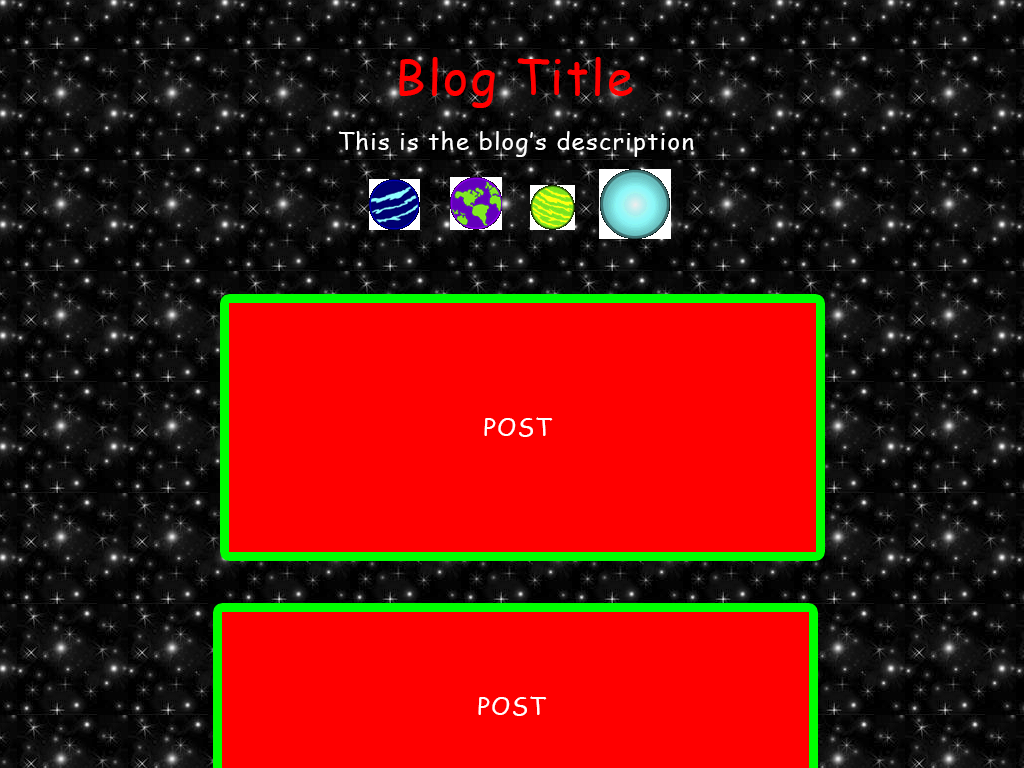
<style>
.page{position:relative;width:1024px;height:768px;background:#ff0000}
.page>*{position:absolute;margin:0}
.t1{font:48px "ComicSansMS";letter-spacing:0.05em;color:#ff0000}
.t2{font:24px "ComicSansMS";letter-spacing:0.05em;color:#ffffff}
</style>
<div class="page">
<p class="t1" style="left:399px;top:57px;width:234px;height:51px">Blog Title</p>
<p class="t2" style="left:338px;top:131px;width:356px;height:26px">This is the blog’s description</p>
<p class="t2" style="left:484px;top:417px;width:69px;height:20px">POST</p>
<p class="t2" style="left:478px;top:696px;width:69px;height:20px">POST</p>
</div>
